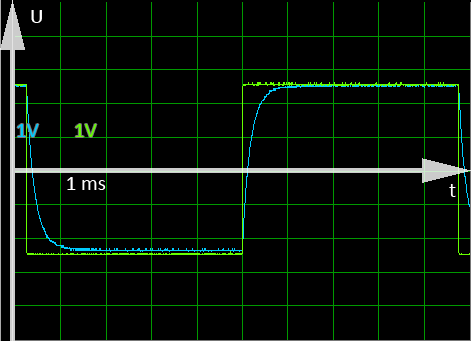
<style>
.page{position:relative;width:471px;height:341px;background:#000000}
.page>*{position:absolute;margin:0}
.t1{font:36px "Calibri";color:#ffffff}
.t2{font:36px "Calibri";color:#00ccff}
.t3{font:36px "Calibri";color:#66ff00}
</style>
<div class="page">
<p class="t1" style="left:31px;top:10px;width:11px;height:13px">U</p>
<p class="t2" style="left:17px;top:124px;width:22px;height:13px">1V</p>
<p class="t3" style="left:75px;top:124px;width:22px;height:13px">1V</p>
<p class="t1" style="left:67px;top:177px;width:39px;height:13px">1 ms</p>
<p class="t1" style="left:449px;top:184px;width:7px;height:13px">t</p>
</div>
